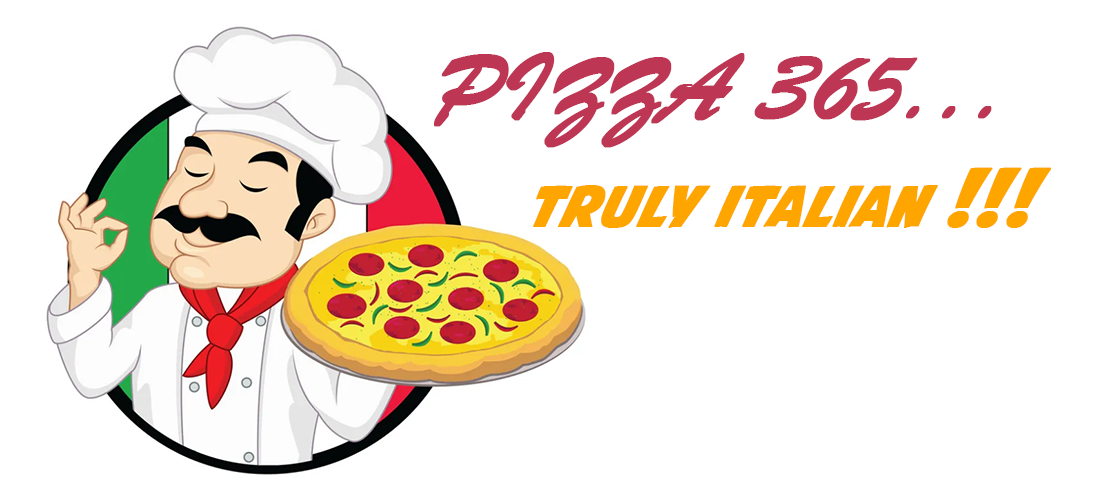
<style>
.page{position:relative;width:1100px;height:500px;background:#ffffff}
.page>*{position:absolute;margin:0}
.t1{font:100px "BrushScriptMT";color:#bd3653;font-variant:small-caps;font-weight:bold;font-style:italic}
.t2{font:80px "AvengeanceMightiestAvenger";color:#ffa500;font-variant:small-caps;font-weight:bold;font-style:italic}
</style>
<div class="page">
<p class="t1" style="left:434px;top:52px;width:558px;height:96px">PIZZA 365...</p>
<p class="t2" style="left:533px;top:167px;width:518px;height:61px">truly italian !!!</p>
</div>
